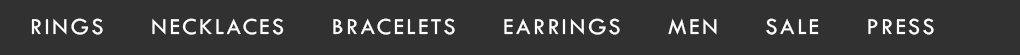
<style>
.page{position:relative;width:1020px;height:55px;background:#313131}
.page>*{position:absolute;margin:0}
.t1{font:23.8px "TwCenMT-Regular";letter-spacing:0.1em;color:#ffffff}
</style>
<div class="page">
<p class="t1" style="left:31px;top:18px;width:903px;height:17px">RINGS     NECKLACES     BRACELETS     EARRINGS     MEN     SALE     PRESS</p>
</div>
